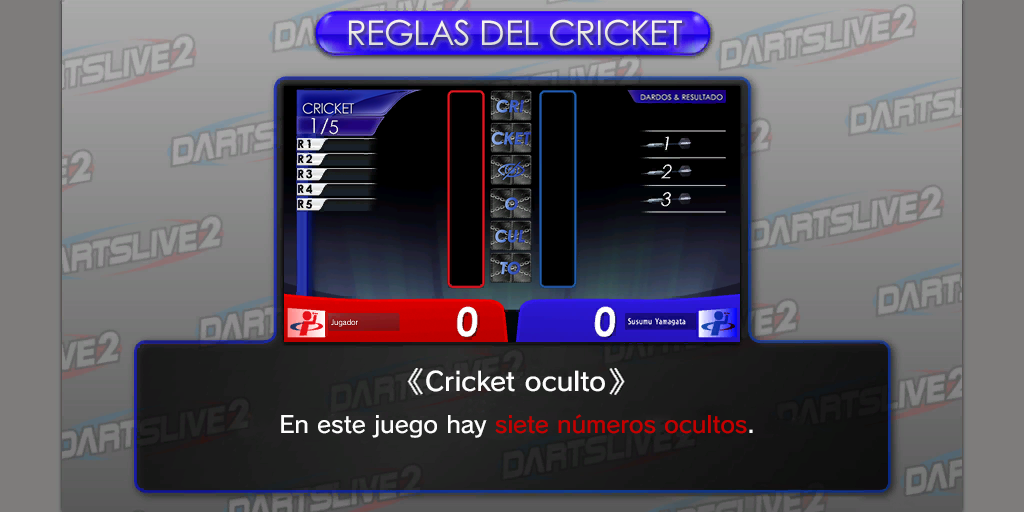
<style>
.page{position:relative;width:1024px;height:512px}
.page>*{position:absolute;margin:0}
.t1{font:34.1px "CenturyGothicPaneuropean";color:#eae9e6}
.t2{font:25.9px "SCEPS3RodinLATIN-Regular";color:#fdfdfd;scale:1.04 1}
.t3{font:23px "SCEPS3RodinLATIN-Regular";color:#c40000}
.t4{font:23px "SCEPS3RodinLATIN-Regular";color:#fdfdfd}
</style>
<div class="page">
<p class="t1" style="left:349px;top:19px;width:333px;height:27px">REGLAS DEL CRICKET</p>
<p class="t2" style="left:426px;top:370px;width:179px;height:22px">Cricket oculto</p>
<p class="t3" style="left:281px;top:414px;width:472px;height:24px"><span class="t4">En este juego hay </span>siete números ocultos<span class="t4">.</span></p>
</div>
